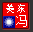
<style>
.page{position:relative;width:33px;height:32px;background:#f20000}
.page>*{position:absolute;margin:0}
.t1{font:10.4px "SimSun";color:#ffffff}
.t2{font:11.7px "SimSun";color:#ffffff}
</style>
<div class="page">
<p class="t1" style="left:6px;top:4px;width:19px;height:9px">美东</p>
<p class="t2" style="left:16px;top:15px;width:11px;height:12px">冯</p>
</div>
